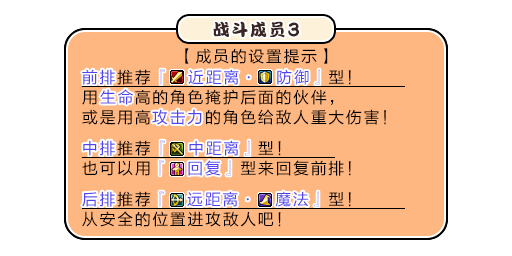
<style>
.page{position:relative;width:512px;height:256px;background:#ffb782}
.page>*{position:absolute;margin:0}
.t1{font:17px "DFPKanTingLiuW9";letter-spacing:0.1em;color:#3b2626}
.t2{font:20.4px "DFPKanTingLiuW9";letter-spacing:0.1em;color:#3b2626;scale:0.83 1}
.t3{font:16px "FZLTHJW--GB1-0";letter-spacing:0.1em;color:#000000}
.t4{font:16px/20px "FZLTHJW--GB1-0";letter-spacing:0.1em;color:#000000}
.t5{font:16px/20px "FZLTHJW--GB1-0";letter-spacing:0.1em;color:#5444ed;text-decoration:underline}
.t6{font:16px/20px "FZLTHJW--GB1-0";letter-spacing:0.1em;color:#000000;text-decoration:underline}
.t7{font:16px/20px "FZLTHJW--GB1-0";letter-spacing:0.1em;color:#5444ed}
.t8{font:16px "FZLTHJW--GB1-0";letter-spacing:0.1em;color:#5444ed}
</style>
<div class="page">
<p class="t1" style="left:213px;top:21px;width:86px;height:17px">战斗成员<span class="t2">3</span></p>
<p class="t3" style="left:185px;top:48px;width:143px;height:16px">【成员的设置提示】</p>
<p class="t4" style="left:81px;top:69px;width:305px;height:56px"><span class="t5">前排</span><span class="t6">推荐</span><span class="t5">『　近距离·　防御』</span><span class="t6">型！<br></span>用<span class="t7">生命</span>高的角色掩护后面的伙伴，<br>或是用高<span class="t7">攻击力</span>的角色给敌人重大伤害！</p>
<p class="t8" style="left:82px;top:69px;width:33px;height:16px">前排</p>
<p class="t8" style="left:160px;top:69px;width:160px;height:16px">『　近距离·　防御』</p>
<p class="t8" style="left:100px;top:89px;width:33px;height:16px">生命</p>
<p class="t8" style="left:152px;top:109px;width:50px;height:16px">攻击力</p>
<p class="t4" style="left:81px;top:140px;width:270px;height:36px"><span class="t5">中排</span><span class="t6">推荐</span><span class="t5">『　中距离』</span><span class="t6">型！<br></span>也可以用<span class="t7">『　回复』</span>型来回复前排！</p>
<p class="t8" style="left:83px;top:140px;width:32px;height:16px">中排</p>
<p class="t8" style="left:160px;top:140px;width:90px;height:16px">『　中距离』</p>
<p class="t8" style="left:159px;top:160px;width:72px;height:16px">『　回复』</p>
<p class="t4" style="left:81px;top:191px;width:283px;height:36px"><span class="t5">后排</span><span class="t6">推荐</span><span class="t5">『　远距离·　魔法』</span><span class="t6">型！<br></span>从安全的位置进攻敌人吧！</p>
<p class="t8" style="left:82px;top:191px;width:33px;height:16px">后排</p>
<p class="t8" style="left:159px;top:191px;width:160px;height:16px">『　远距离·　魔法』</p>
</div>
